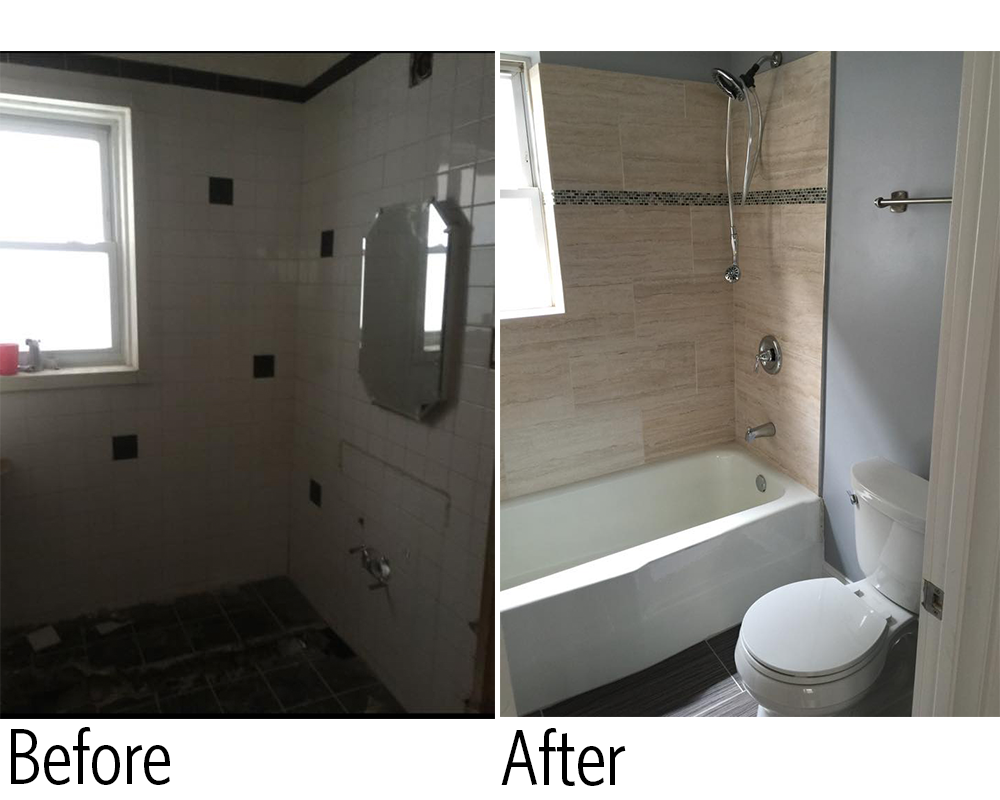
<style>
.page{position:relative;width:1000px;height:800px}
.page>*{position:absolute;margin:0}
.t1{font:79.6px "WhitneyHTF-BookCondensed";color:#000000}
</style>
<div class="page">
<p class="t1" style="left:11px;top:727px;width:159px;height:58px">Before</p>
<p class="t1" style="left:501px;top:728px;width:125px;height:58px">After</p>
</div>
